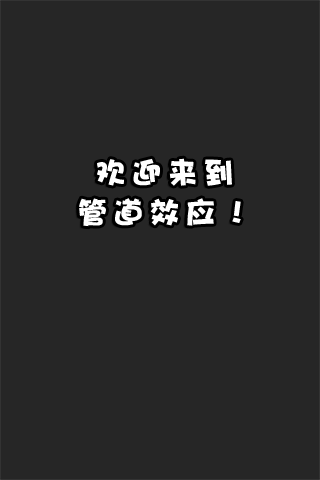
<style>
.page{position:relative;width:320px;height:480px;background:#262626}
.page>*{position:absolute;margin:0}
.t1{font:30px/40px "DFPHaiBaoW12";letter-spacing:0.2em;color:#ffffff}
</style>
<div class="page">
<p class="t1" style="left:79px;top:158px;width:162px;height:69px;text-align:center">欢迎来到<br>管道效应！</p>
</div>
